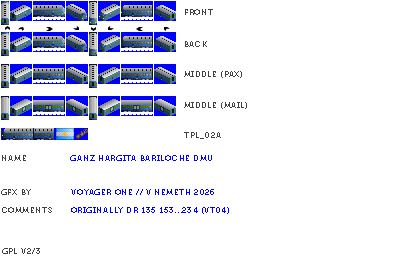
<style>
.page{position:relative;width:400px;height:270px;background:#ffffff}
.page>*{position:absolute;margin:0}
.t1{font:8px "Museo700-Regular";letter-spacing:0.075em;color:#404040;text-transform:uppercase}
.t2{font:8px "Museo700-Regular";letter-spacing:0.075em;color:#0000ff;text-transform:uppercase}
</style>
<div class="page">
<p class="t1" style="left:185px;top:9px;width:28px;height:6px">front</p>
<p class="t1" style="left:185px;top:41px;width:22px;height:6px">back</p>
<p class="t1" style="left:184px;top:71px;width:58px;height:7px">middle (pax)</p>
<p class="t1" style="left:184px;top:102px;width:63px;height:7px">middle (mail)</p>
<p class="t1" style="left:184px;top:132px;width:37px;height:7px">tpl_02a</p>
<p class="t1" style="left:2px;top:155px;width:24px;height:6px">name</p>
<p class="t2" style="left:70px;top:155px;width:142px;height:6px">Ganz hargita Bariloche dmu</p>
<p class="t1" style="left:1px;top:189px;width:30px;height:6px">gfx by</p>
<p class="t2" style="left:71px;top:189px;width:143px;height:6px">voyager one // v nemeth 2026</p>
<p class="t1" style="left:2px;top:207px;width:50px;height:6px">comments</p>
<p class="t2" style="left:71px;top:207px;width:158px;height:7px">originally dr 135 153...234 (vt04)</p>
<p class="t1" style="left:2px;top:248px;width:38px;height:6px">gpl v2/3</p>
</div>
